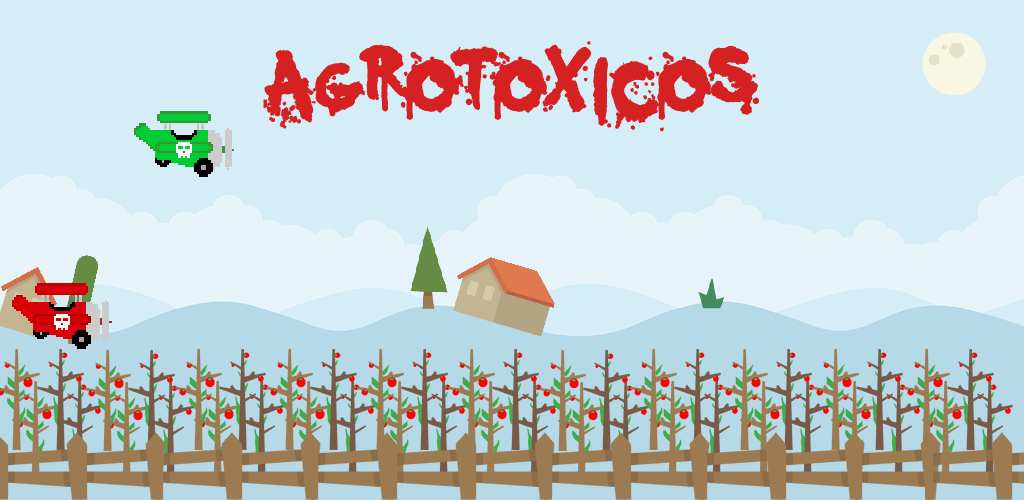
<style>
.page{position:relative;width:1024px;height:500px;background:#d5edf7}
.page>*{position:absolute;margin:0}
.t1{font:120px "YouMurdererBB";color:#d52121;font-weight:bold}
</style>
<div class="page">
<p class="t1" style="left:263px;top:41px;width:496px;height:91px">Agrotoxicos</p>
</div>
